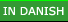
<style>
.page{position:relative;width:68px;height:22px;background:#339933}
.page>*{position:absolute;margin:0}
.t1{font:11px "Verdana";color:#ffffff}
</style>
<div class="page">
<p class="t1" style="left:3px;top:6px;width:61px;height:10px">IN DANISH</p>
</div>
